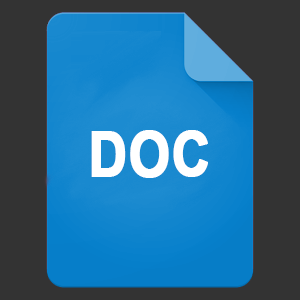
<style>
.page{position:relative;width:300px;height:300px;background:#333333}
.page>*{position:absolute;margin:0}
.t1{font:62.4px "Arial-BoldMT";letter-spacing:0.01em;color:#ffffff;font-weight:bold;scale:0.85 1}
</style>
<div class="page">
<p class="t1" style="left:91px;top:130px;width:117px;height:48px">DOC</p>
</div>
